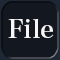
<style>
.page{position:relative;width:60px;height:60px;background:#131820}
.page>*{position:absolute;margin:0}
.t1{font:25px "HiraMinProN-W6";color:#f8f6f6}
</style>
<div class="page">
<p class="t1" style="left:8px;top:19px;width:46px;height:19px">File</p>
</div>
